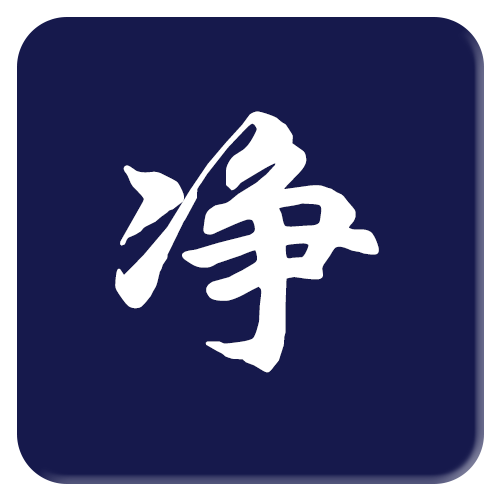
<style>
.page{position:relative;width:500px;height:500px;background:#16194c}
.page>*{position:absolute;margin:0}
.t1{font:301px "HYi1gj";letter-spacing:0.1em;color:#ffffff;text-transform:uppercase;font-weight:bold;scale:1.18 1}
.t2{font:35.4px "HYe3gj";letter-spacing:0.1em;color:#ffffff;text-transform:uppercase;scale:1.18 1}
</style>
<div class="page">
<p class="t1" style="left:115px;top:111px;width:264px;height:262px"><span class="t2"><br></span>净</p>
</div>
